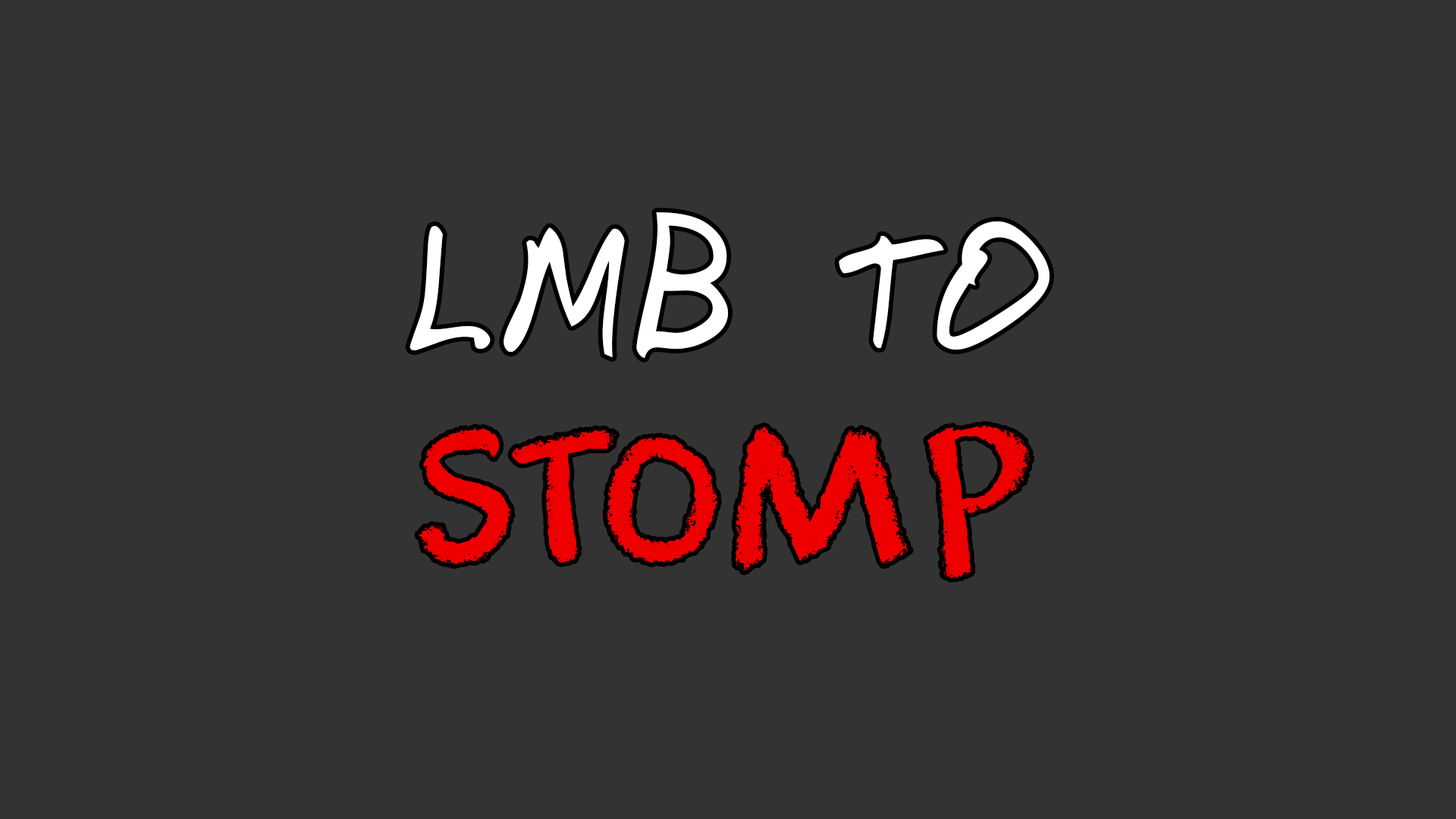
<style>
.page{position:relative;width:1456px;height:819px;background:#333333}
.page>*{position:absolute;margin:0}
.t1{font:183.5px "DomesticManners";letter-spacing:0.04em;color:#ffffff}
.t2{font:183.5px "DKCoolCrayon";letter-spacing:0.04em;color:#ee0000}
</style>
<div class="page">
<p class="t1" style="left:409px;top:212px;width:641px;height:367px;text-align:center">LMB TO<br><span class="t2">STOMP</span></p>
</div>
